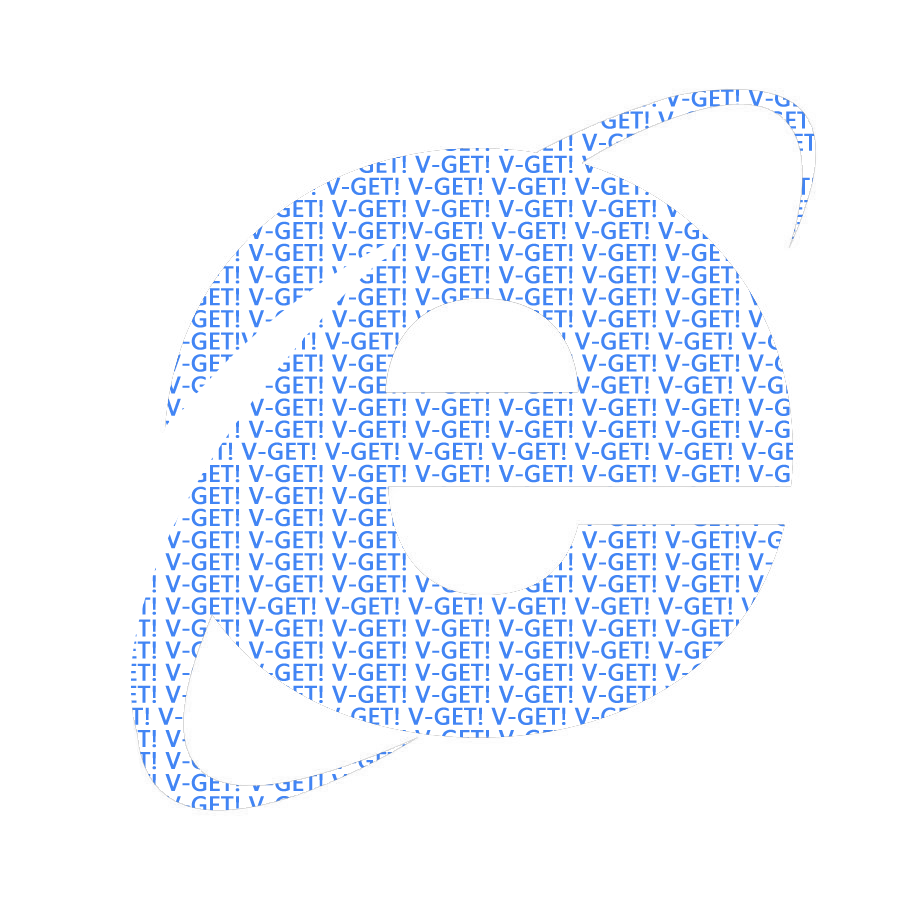
<style>
.page{position:relative;width:900px;height:900px;background:#ffffff}
.page>*{position:absolute;margin:0}
.t1{font:22.1px/22.1px "MicrosoftYaHei";font-weight:bold}
</style>
<div class="page">
<p class="t1" style="left:0px;top:1px;width:823px;height:879px">V-GET! V-GET! V-GET! V-GET! V-GET! V-GET! V-GET! V-GET!V-GET! V-GET! V-GET! V-GET! V-GET! V-GET! V-GET! V-GET! V-GET! V-GET! V-GET! V-GET! V-GET! V-GET! V-GET! V-GET! V-GET! V-GET! V-GET! V-GET! V-GET! V-GET! V-GET! V-GET!V-GET! V-GET! V-GET! V-GET! V-GET! V-GET! V-GET! V-GET! V-GET! V-GET! V-GET! V-GET! V-GET! V-GET! V-GET! V-GET! V-GET! V-GET! V-GET! V-GET! V-GET! V-GET! V-GET! V-GET!V-GET! V-GET! V-GET! V-GET! V-GET! V-GET! V-GET! V-GET! V-GET! V-GET! V-GET! V-GET! V-GET! V-GET! V-GET! V-GET! V-GET! V-GET! V-GET! V-GET! V-GET! V-GET! V-GET! V-GET!V-GET! V-GET! V-GET! V-GET! V-GET! V-GET! V-GET! V-GET! V-GET! V-GET! V-GET! V-GET! V-GET! V-GET! V-GET! V-GET! V-GET! V-GET! V-GET! V-GET! V-GET! V-GET! V-GET! V-GET!V-GET! V-GET! V-GET! V-GET! V-GET! V-GET! V-GET! V-GET! V-GET! V-GET! V-GET! V-GET! V-GET! V-GET! V-GET! V-GET! V-GET! V-GET! V-GET! V-GET! V-GET! V-GET! V-GET! V-GET!V-GET! V-GET! V-GET! V-GET! V-GET! V-GET! V-GET! V-GET! V-GET! V-GET! V-GET! V-GET! V-GET! V-GET! V-GET! V-GET! V-GET! V-GET! V-GET! V-GET! V-GET! V-GET! V-GET! V-GET!V-GET! V-GET! V-GET! V-GET! V-GET! V-GET! V-GET! V-GET! V-GET! V-GET! V-GET! V-GET! V-GET! V-GET! V-GET! V-GET! V-GET! V-GET! V-GET! V-GET! V-GET! V-GET! V-GET! V-GET!V-GET! V-GET! V-GET! V-GET! V-GET! V-GET! V-GET! V-GET! V-GET! V-GET! V-GET! V-GET! V-GET! V-GET! V-GET! V-GET! V-GET! V-GET! V-GET! V-GET! V-GET! V-GET! V-GET! V-GET!V-GET! V-GET! V-GET! V-GET! V-GET! V-GET! V-GET! V-GET! V-GET! V-GET! V-GET! V-GET! V-GET! V-GET! V-GET! V-GET! V-GET! V-GET! V-GET! V-GET! V-GET! V-GET! V-GET! V-GET!V-GET! V-GET! V-GET! V-GET! V-GET! V-GET! V-GET! V-GET! V-GET! V-GET! V-GET! V-GET! V-GET! V-GET! V-GET! V-GET! V-GET! V-GET! V-GET! V-GET! V-GET! V-GET! V-GET! V-GET!V-GET! V-GET! V-GET! V-GET! V-GET! V-GET! V-GET! V-GET! V-GET! V-GET! V-GET! V-GET! V-GET! V-GET! V-GET! V-GET! V-GET! V-GET! V-GET! V-GET! V-GET! V-GET! V-GET! V-GET!V-GET! V-GET! V-GET! V-GET! V-GET! V-GET! V-GET! V-GET! V-GET! V-GET! V-GET! V-GET! V-GET! V-GET! V-GET! V-GET! V-GET! V-GET! V-GET! V-GET! V-GET! V-GET! V-GET! V-GET!V-GET! V-GET! V-GET! V-GET! V-GET! V-GET! V-GET! V-GET! V-GET! V-GET! V-GET! V-GET! V-GET! V-GET! V-GET! V-GET! V-GET! V-GET! V-GET! V-GET! V-GET! V-GET! V-GET! V-GET!V-GET! V-GET! V-GET! V-GET! V-GET! V-GET! V-GET! V-GET! V-GET! V-GET! V-GET! V-GET! V-GET! V-GET! V-GET! V-GET! V-GET! V-GET! V-GET! V-GET! V-GET! V-GET! V-GET! V-GET!V-GET! V-GET! V-GET! V-GET! V-GET! V-GET! V-GET! V-GET! V-GET! V-GET! V-GET! V-GET! V-GET! V-GET! V-GET! V-GET! V-GET! V-GET! V-GET! V-GET! V-GET! V-GET! V-GET! V-GET!V-GET! V-GET! V-GET! V-GET! V-GET! V-GET! V-GET! V-GET! V-GET! V-GET! V-GET! V-GET! V-GET! V-GET! V-GET! V-GET! V-GET! V-GET! V-GET! V-GET! V-GET! V-GET! V-GET! V-GET!V-GET! V-GET! V-GET! V-GET! V-GET! V-GET! V-GET! V-GET! V-GET! V-GET! V-GET! V-GET! V-GET! V-GET! V-GET! V-GET! V-GET! V-GET! V-GET! V-GET! V-GET! V-GET! V-GET! V-GET!V-GET! V-GET! V-GET! V-GET! V-GET! V-GET! V-GET! V-GET! V-GET! V-GET! V-GET! V-GET! V-GET! V-GET! V-GET! V-GET! V-GET! V-GET! V-GET! V-GET! V-GET! V-GET! V-GET! V-GET!V-GET! V-GET! V-GET! V-GET! V-GET! V-GET! V-GET! V-GET! V-GET! V-GET! V-GET! V-GET! V-GET! V-GET! V-GET! V-GET! V-GET! V-GET! V-GET! V-GET! V-GET! V-GET! V-GET! V-GET!V-GET! V-GET! V-GET! V-GET! V-GET! V-GET! V-GET! V-GET! V-GET! V-GET! V-GET! V-GET! V-GET! V-GET! V-GET! V-GET! V-GET! V-GET! V-GET! V-GET! V-GET! V-GET! V-GET! V-GET!V-GET! V-GET! V-GET! V-GET! V-GET! V-GET! V-GET! V-GET! V-GET! V-GET! V-GET! V-GET! V-GET! V-GET! V-GET! V-GET! V-GET! V-GET! V-GET! V-GET! V-GET! V-GET! V-GET! V-GET!V-GET! V-GET! V-GET! V-GET! V-GET! V-GET! V-GET! V-GET! V-GET! V-GET! V-GET! V-GET! V-GET! V-GET! V-GET! V-GET!</p>
</div>
